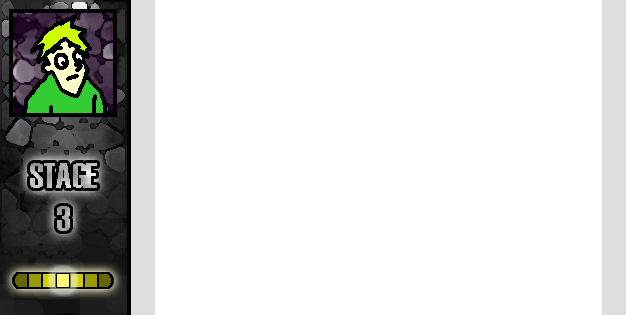
<style>
.page{position:relative;width:626px;height:315px;background:#ffffff}
.page>*{position:absolute;margin:0}
.t1{font:36px "Haettenschweiler"}
</style>
<div class="page">
<p class="t1" style="left:30px;top:163px;width:67px;height:68px;text-align:center">STAGE<br>3</p>
</div>
